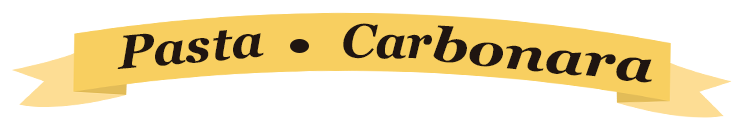
<style>
.page{position:relative;width:742px;height:132px;background:#ffffff}
.page>*{position:absolute;margin:0}
.t1{font:47.4px "Georgia-BoldItalic";color:#1f1511;scale:1.04 1}
.t2{font:47.4px "Georgia-BoldItalic";color:#1f1511}
.t3{font:47.4px "Georgia-BoldItalic";color:#1f1511;scale:1.23 1}
</style>
<div class="page">
<p class="t1" style="left:117px;top:30px;width:147px;height:39px;rotate:-5deg">Pasta</p>
<p class="t2" style="left:343px;top:23px;width:89px;height:36px;rotate:1deg">Car</p>
<p class="t3" style="left:433px;top:25px;width:219px;height:58px;rotate:6deg">bonara</p>
</div>
